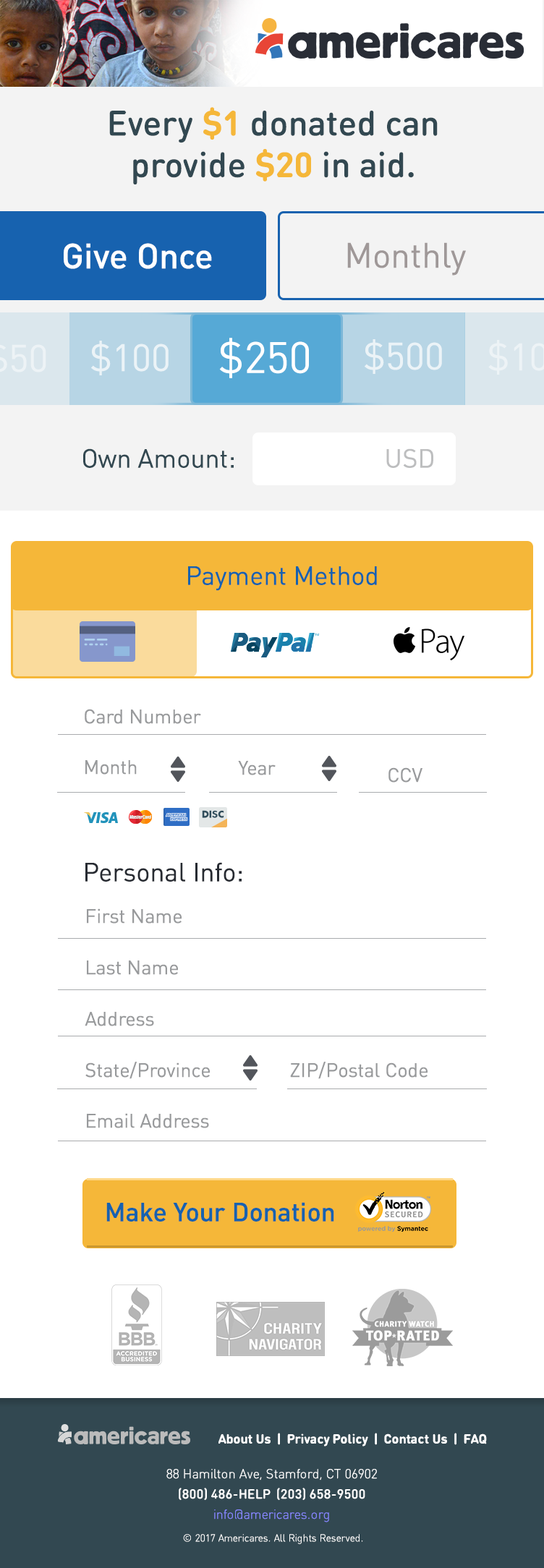
<style>
.page{position:relative;width:544px;height:1568px;background:#ffffff}
.page>*{position:absolute;margin:0}
.t1{font:34.7px "DINRoundPro-Medium";color:#324851}
.t2{font:34.7px "DINRoundPro-Bold";color:#f5b739}
.t3{font:34.7px "DINPro-Medium";color:#ffffff}
.t4{font:34.7px "DINPro-Regular";color:#9f9898}
.t5{font:37.6px "DINPro-Regular";color:#ffffff}
.t6{font:43.4px "DINPro-Regular";color:#ffffff}
.t7{font:26px "DINPro-Regular";color:#324851}
.t8{font:26px "DINPro-Regular";color:#bdbebf}
.t9{font:26px "DINPro-Regular";color:#1762af}
.t10{font:19.5px "DINPro-Regular";color:#989a9c}
.t11{font:26px "DINPro-Regular";color:#272b32}
.t12{font:26px "DINPro-Medium";color:#1762af}
.t13{font:13px "DINRoundPro-Bold";color:#ffffff}
.t14{font:13px/20.3px "DINRoundPro-Light";color:#ffffff}
.t15{font:13px/20.3px "DINRoundPro-Medium";color:#ffffff}
.t16{font:13px/20.3px "DINRoundPro-Light";color:#8787ff}
.t17{font:10.1px "DINRoundPro-Light";color:#ffffff}
.t18{font:10.1px "DINPro-Regular";color:#ffffff}
</style>
<div class="page">
<p class="t1" style="left:109px;top:107px;width:329px;height:77px;text-align:center">Every <span class="t2">$1 </span>donated can <br>provide <span class="t2">$20</span> in aid.</p>
<p class="t3" style="left:64px;top:243px;width:148px;height:26px">Give Once</p>
<p class="t4" style="left:347px;top:242px;width:119px;height:34px">Monthly</p>
<p class="t5" style="left:91px;top:341px;width:78px;height:34px;opacity:0.7">$100</p>
<p class="t6" style="left:219px;top:338px;width:90px;height:40px">$250</p>
<p class="t5" style="left:365px;top:339px;width:77px;height:35px;opacity:0.7">$500</p>
<p class="t7" style="left:83px;top:448px;width:151px;height:20px">Own Amount:</p>
<p class="t8" style="left:386px;top:448px;width:47px;height:20px">USD</p>
<p class="t9" style="left:188px;top:566px;width:189px;height:25px">Payment Method</p>
<p class="t10" style="left:85px;top:709px;width:116px;height:15px">Card Number</p>
<p class="t10" style="left:85px;top:760px;width:52px;height:15px">Month</p>
<p class="t10" style="left:238px;top:761px;width:38px;height:14px">Year</p>
<p class="t10" style="left:388px;top:767px;width:34px;height:16px">CCV</p>
<p class="t11" style="left:85px;top:862px;width:157px;height:20px">Personal Info:</p>
<p class="t10" style="left:87px;top:908px;width:95px;height:16px">First Name</p>
<p class="t10" style="left:87px;top:960px;width:91px;height:15px">Last Name</p>
<p class="t10" style="left:85px;top:1012px;width:69px;height:14px">Address</p>
<p class="t10" style="left:85px;top:1062px;width:125px;height:17px">State/Province</p>
<p class="t10" style="left:290px;top:1062px;width:137px;height:17px">ZIP/Postal Code</p>
<p class="t10" style="left:87px;top:1113px;width:122px;height:15px">Email Address</p>
<p class="t12" style="left:106px;top:1202px;width:228px;height:20px">Make Your Donation</p>
<p class="t13" style="left:218px;top:1433px;width:269px;height:13px">About Us  |  Privacy Policy  |  Contact Us  |  FAQ</p>
<p class="t14" style="left:166px;top:1469px;width:211px;height:53px;text-align:center">88 Hamilton Ave, Stamford, CT 06902<br><span class="t15">(800) 486-HELP  (203) 658-9500<br></span><span class="t16">info@americares.org</span></p>
<p class="t17" style="left:183px;top:1534px;width:180px;height:10px"><span class="t18"><br></span>© 2017 Americares. All Rights Reserved.</p>
</div>
